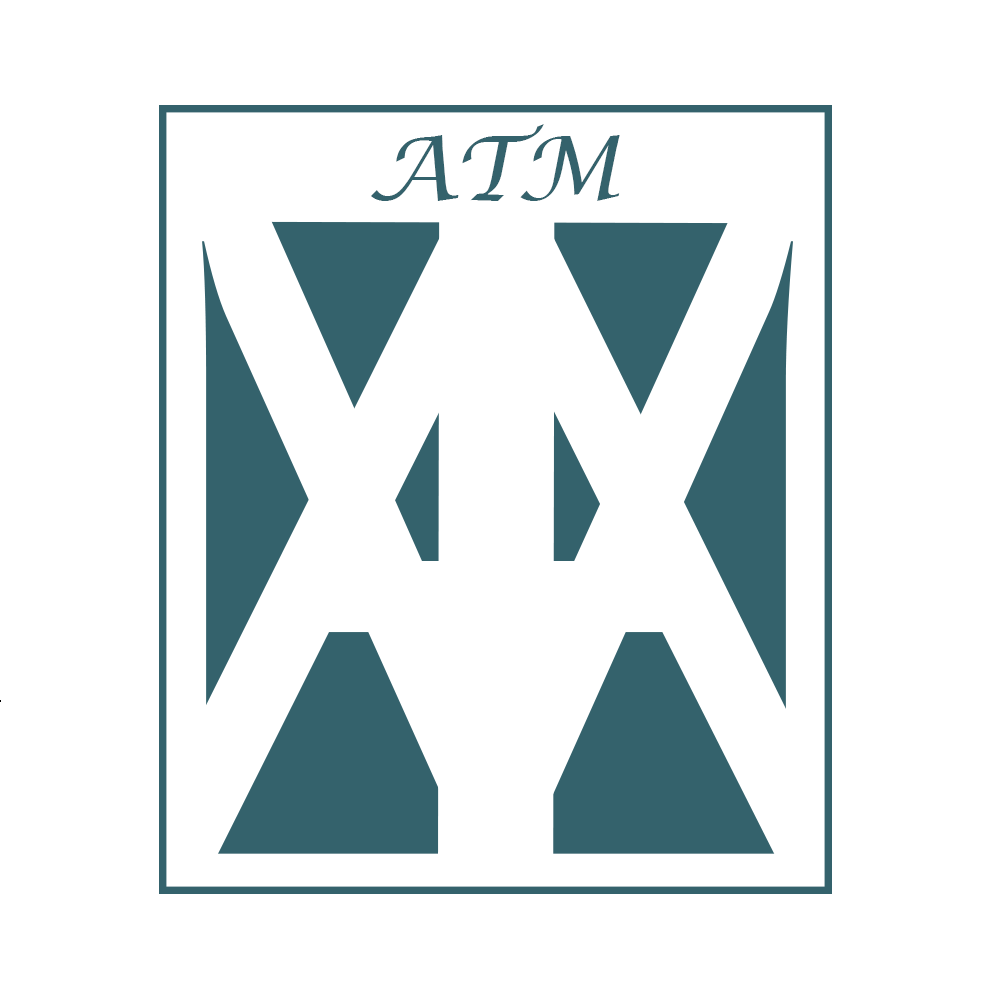
<style>
.page{position:relative;width:1000px;height:1000px;background:#ffffff}
.page>*{position:absolute;margin:0}
.t1{font:88.9px "LucidaCalligraphy-Italic";color:#34626c}
.t2{font:1015.5px "CenturyGothic";color:#ffffff;scale:1.06 1}
</style>
<div class="page">
<p class="t1" style="left:371px;top:124px;width:249px;height:77px">ATM</p>
<p class="t2" style="left:122px;top:142px;width:745px;height:730px">A</p>
</div>
